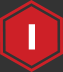
<style>
.page{position:relative;width:63px;height:72px;background:#cd2027}
.page>*{position:absolute;margin:0}
.t1{font:36px "Whitney-Bold";color:#ffffff}
</style>
<div class="page">
<p class="t1" style="left:28px;top:24px;width:7px;height:26px">I</p>
</div>
